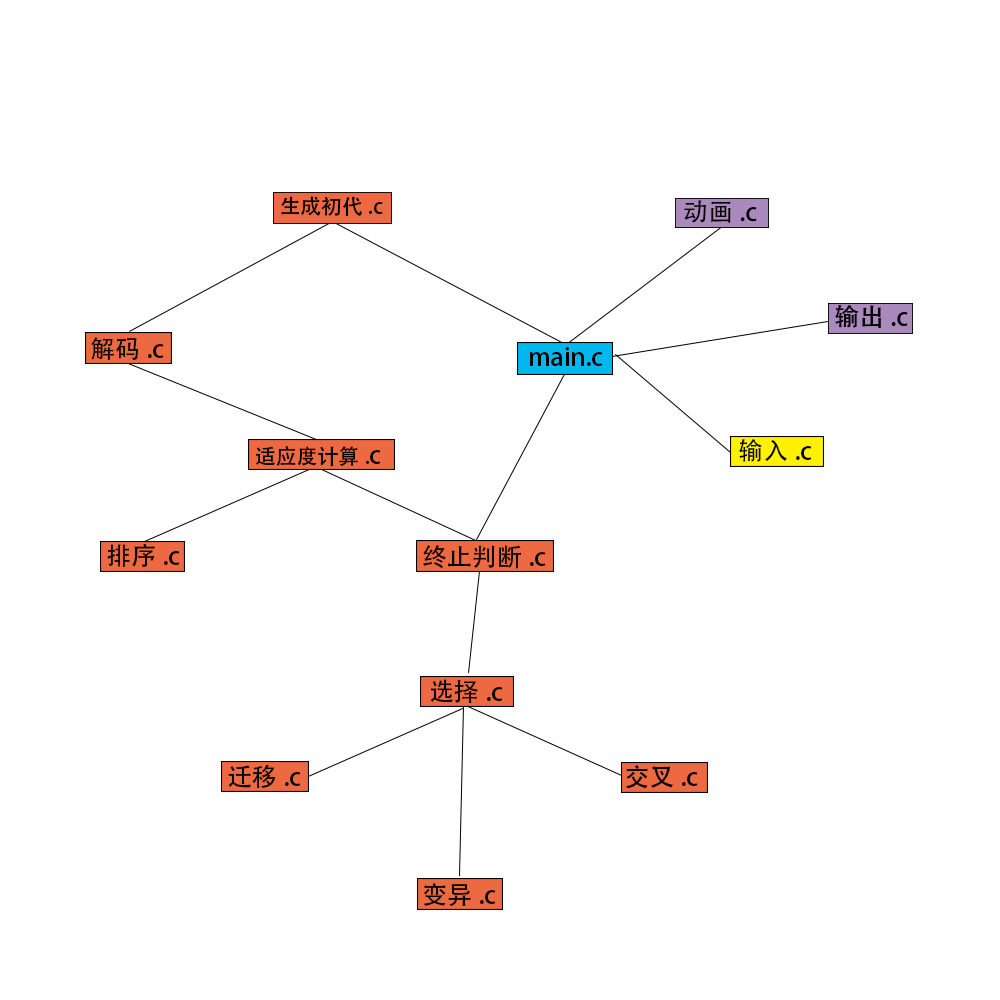
<style>
.page{position:relative;width:1000px;height:1000px;background:#ffffff}
.page>*{position:absolute;margin:0}
.t1{font:20.8px "AdobeHeitiStd-Regular";color:#000000}
.t2{font:25px "AdobeHeitiStd-Regular";color:#000000}
</style>
<div class="page">
<p class="t1" style="left:281px;top:196px;width:102px;height:20px">生成初代.c</p>
<p class="t2" style="left:684px;top:200px;width:73px;height:23px">动画.c</p>
<p class="t2" style="left:835px;top:305px;width:73px;height:23px">输出.c</p>
<p class="t2" style="left:91px;top:337px;width:73px;height:23px">解码.c</p>
<p class="t2" style="left:530px;top:347px;width:73px;height:19px">main.c</p>
<p class="t1" style="left:256px;top:446px;width:125px;height:21px">适应度计算.<span class="t2">c</span></p>
<p class="t2" style="left:739px;top:439px;width:73px;height:23px">输入.c</p>
<p class="t2" style="left:107px;top:543px;width:73px;height:24px">排序.c</p>
<p class="t2" style="left:423px;top:545px;width:123px;height:24px">终止判断.c</p>
<p class="t2" style="left:430px;top:679px;width:73px;height:24px">选择.c</p>
<p class="t2" style="left:228px;top:764px;width:73px;height:24px">迁移.c</p>
<p class="t2" style="left:626px;top:765px;width:72px;height:24px">交叉.c</p>
<p class="t2" style="left:423px;top:883px;width:73px;height:23px">变异.c</p>
</div>
